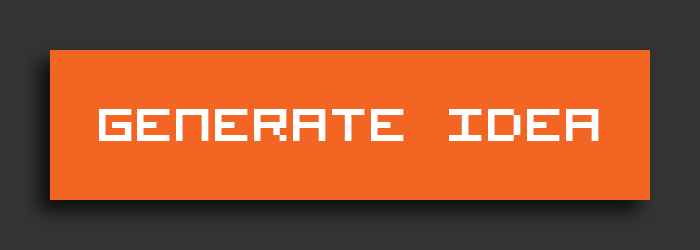
<style>
.page{position:relative;width:700px;height:250px;background:#f26522}
.page>*{position:absolute;margin:0}
.t1{font:83.3px "VisitorTT2BRK";color:#ffffff}
</style>
<div class="page">
<p class="t1" style="left:99px;top:109px;width:500px;height:32px">Generate Idea</p>
</div>
